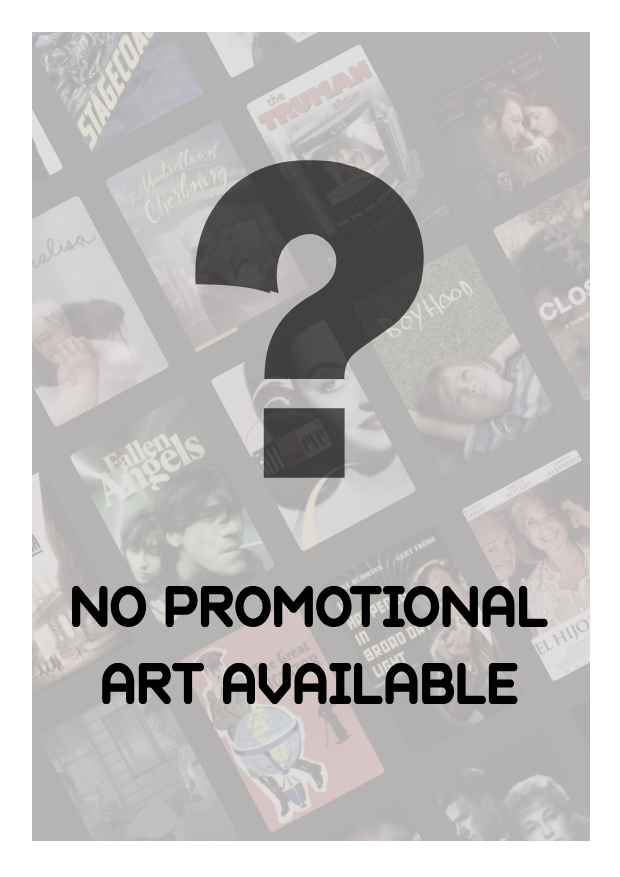
<style>
.page{position:relative;width:620px;height:877px}
.page>*{position:absolute;margin:0}
.t1{font:391px "DelaGothicOne-Regular";color:#444343;font-weight:bold;scale:0.8 1}
.t2{font:64px "GeometrySoftPro-BoldN";color:#000000;font-weight:bold;scale:0.83 1}
</style>
<div class="page">
<p class="t1" style="left:195px;top:160px;width:229px;height:318px">?</p>
<p class="t2" style="left:72px;top:586px;width:476px;height:118px;text-align:center">NO PROMOTIONAL<br>ART AVAILABLE</p>
</div>
